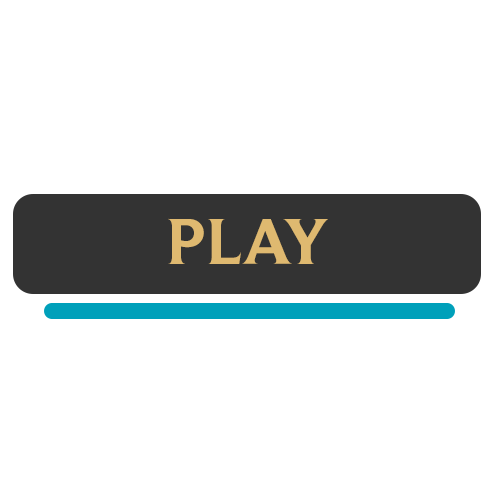
<style>
.page{position:relative;width:500px;height:500px;background:#ffffff}
.page>*{position:absolute;margin:0}
.t1{font:67.4px "BeaufortforLOL-Bold";color:#dfb970}
</style>
<div class="page">
<p class="t1" style="left:168px;top:218px;width:160px;height:46px">PLAY</p>
</div>
